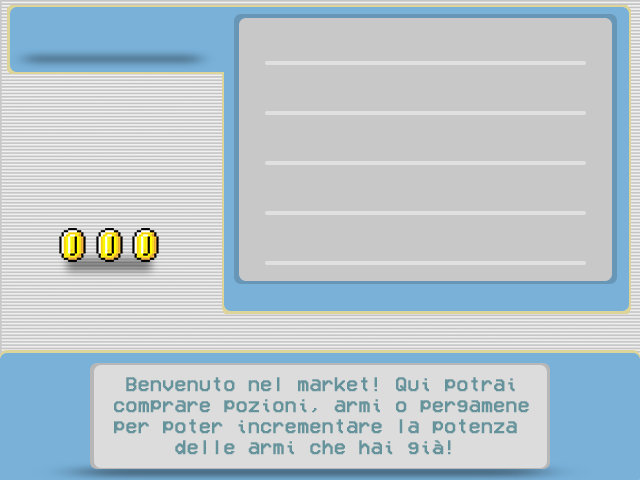
<style>
.page{position:relative;width:640px;height:480px;background:#c8c8c8}
.page>*{position:absolute;margin:0}
.t1{font:20px/21px "VCROSDMono";color:#64939b;font-weight:bold}
</style>
<div class="page">
<p class="t1" style="left:114px;top:377px;width:415px;height:78px;text-align:center">Benvenuto nel market! Qui potrai<br>comprare pozioni, armi o pergamene<br>per poter incrementare la potenza <br>delle armi che hai già!</p>
</div>
